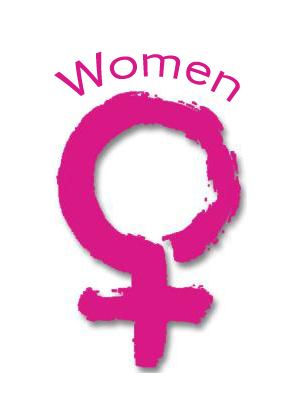
<style>
.page{position:relative;width:300px;height:400px;background:#ffffff}
.page>*{position:absolute;margin:0}
.t1{font:41.7px "EuphemiaCAS";color:#d81887}
</style>
<div class="page">
<p class="t1" style="left:54px;top:51px;width:186px;height:51px">Women</p>
</div>
